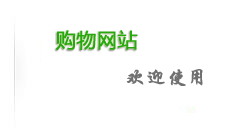
<style>
.page{position:relative;width:249px;height:138px;background:#ffffff}
.page>*{position:absolute;margin:0}
.t1{font:20px "MicrosoftYaHei";color:#25a90b;font-weight:bold}
.t2{font:20px "STXingkai";color:#707070;font-weight:bold}
</style>
<div class="page">
<p class="t1" style="left:56px;top:30px;width:82px;height:20px">购物网站</p>
<p class="t2" style="left:126px;top:69px;width:77px;height:17px">欢迎使用</p>
</div>
